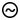
<style>
.page{position:relative;width:20px;height:20px;background:#ffffff}
.page>*{position:absolute;margin:0}
.t1{font:18.1px "Consolas";color:#000000;scale:1.07 1}
</style>
<div class="page">
<p class="t1" style="left:5px;top:8px;width:11px;height:5px">~</p>
</div>
